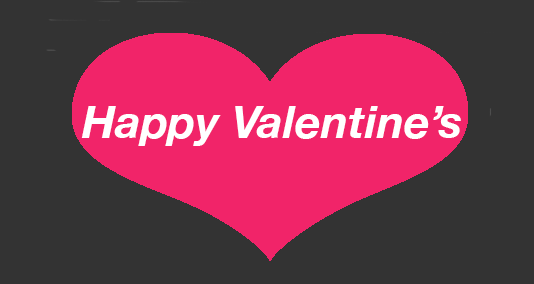
<style>
.page{position:relative;width:534px;height:284px;background:#333333}
.page>*{position:absolute;margin:0}
.t1{font:45px "HelveticaNeue-BoldItalic";color:#ffffff}
</style>
<div class="page">
<p class="t1" style="left:81px;top:106px;width:380px;height:40px">Happy Valentine’s</p>
</div>
